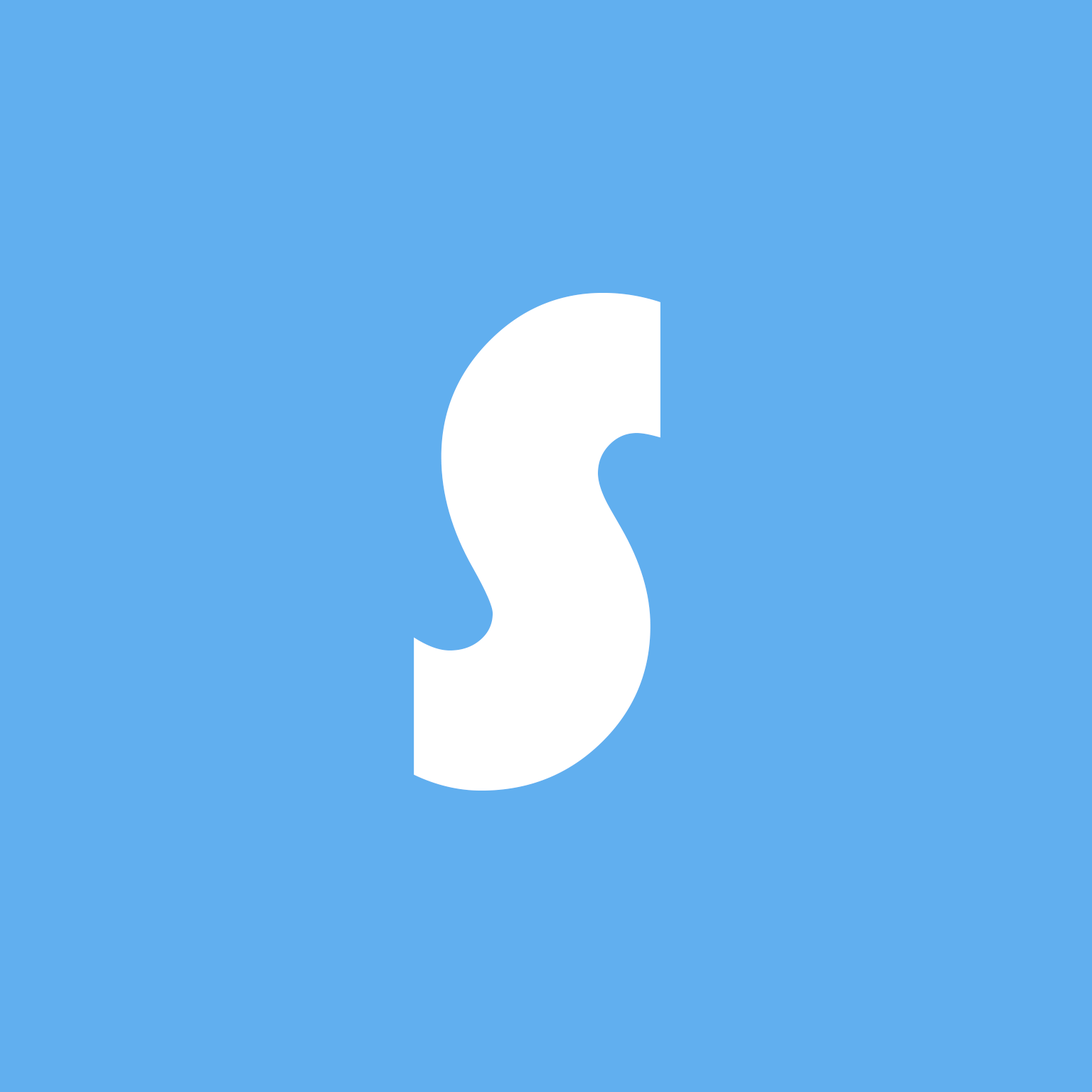
<style>
.page{position:relative;width:1092px;height:1092px;background:#61afef}
.page>*{position:absolute;margin:0}
.t1{font:710.9px "Bauhaus93";color:#ffffff}
</style>
<div class="page">
<p class="t1" style="left:414px;top:293px;width:246px;height:498px">S</p>
</div>
